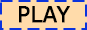
<style>
.page{position:relative;width:87px;height:30px;background:#ffdbaa}
.page>*{position:absolute;margin:0}
.t1{font:21px "Verdana";color:#000000;font-weight:bold}
</style>
<div class="page">
<p class="t1" style="left:19px;top:6px;width:51px;height:17px">PLAY</p>
</div>
